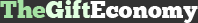
<style>
.page{position:relative;width:198px;height:23px;background:#333333}
.page>*{position:absolute;margin:0}
.t1{font:24px "ChunkFive";color:#ffffff}
.t2{font:24px "ChunkFive";color:#a4e2a2}
.t3{font:24px "ChunkFive";color:#e1ffe0}
</style>
<div class="page">
<p class="t1" style="left:0px;top:0px;width:198px;height:23px"><span class="t2">The</span><span class="t3">Gift</span>Economy</p>
</div>
